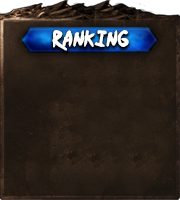
<style>
.page{position:relative;width:180px;height:200px}
.page>*{position:absolute;margin:0}
.t1{font:18.7px "Ninja-Naruto";color:#ffffff}
</style>
<div class="page">
<p class="t1" style="left:52px;top:30px;width:77px;height:21px">ranking</p>
</div>
